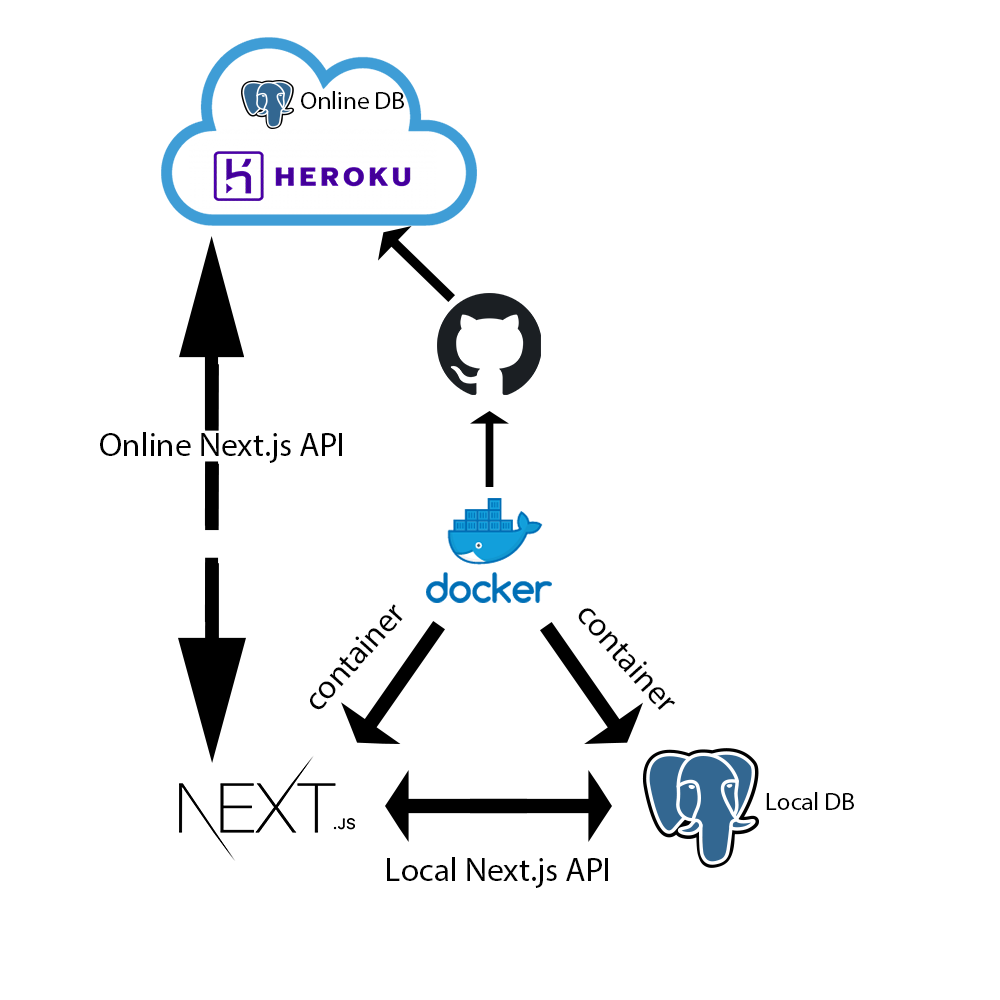
<style>
.page{position:relative;width:1000px;height:1000px;background:#ffffff}
.page>*{position:absolute;margin:0}
.t1{font:25px "MyriadPro-Regular";color:#000000}
.t2{font:33.3px "MyriadPro-Regular";color:#000000}
</style>
<div class="page">
<p class="t1" style="left:301px;top:91px;width:103px;height:18px">Online DB</p>
<p class="t2" style="left:100px;top:432px;width:242px;height:31px">Online Next.js API</p>
<p class="t2" style="left:310px;top:604px;width:93px;height:106px;rotate:-48deg">container</p>
<p class="t2" style="left:578px;top:608px;width:98px;height:102px;rotate:48deg">container</p>
<p class="t1" style="left:766px;top:792px;width:88px;height:18px">Local DB</p>
<p class="t2" style="left:387px;top:857px;width:221px;height:31px">Local Next.js API</p>
</div>
